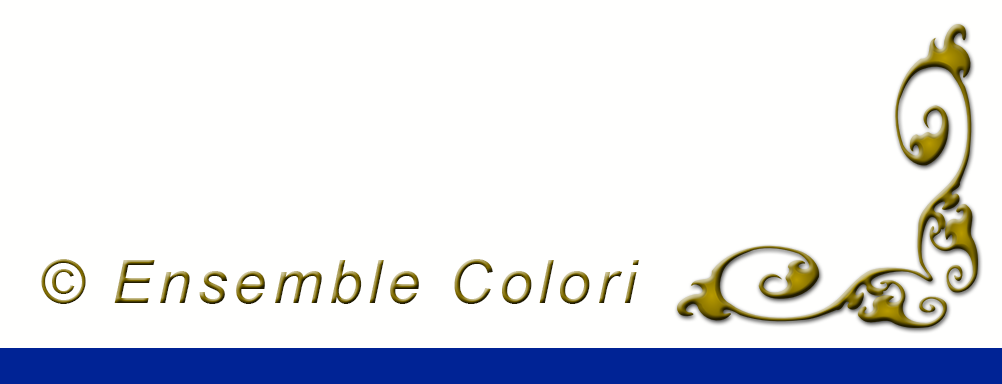
<style>
.page{position:relative;width:1002px;height:384px;background:#fffffe}
.page>*{position:absolute;margin:0}
.t1{font:60px "Arial-ItalicMT";letter-spacing:0.1em}
</style>
<div class="page">
<p class="t1" style="left:41px;top:259px;width:598px;height:45px">© Ensemble Colori</p>
</div>
